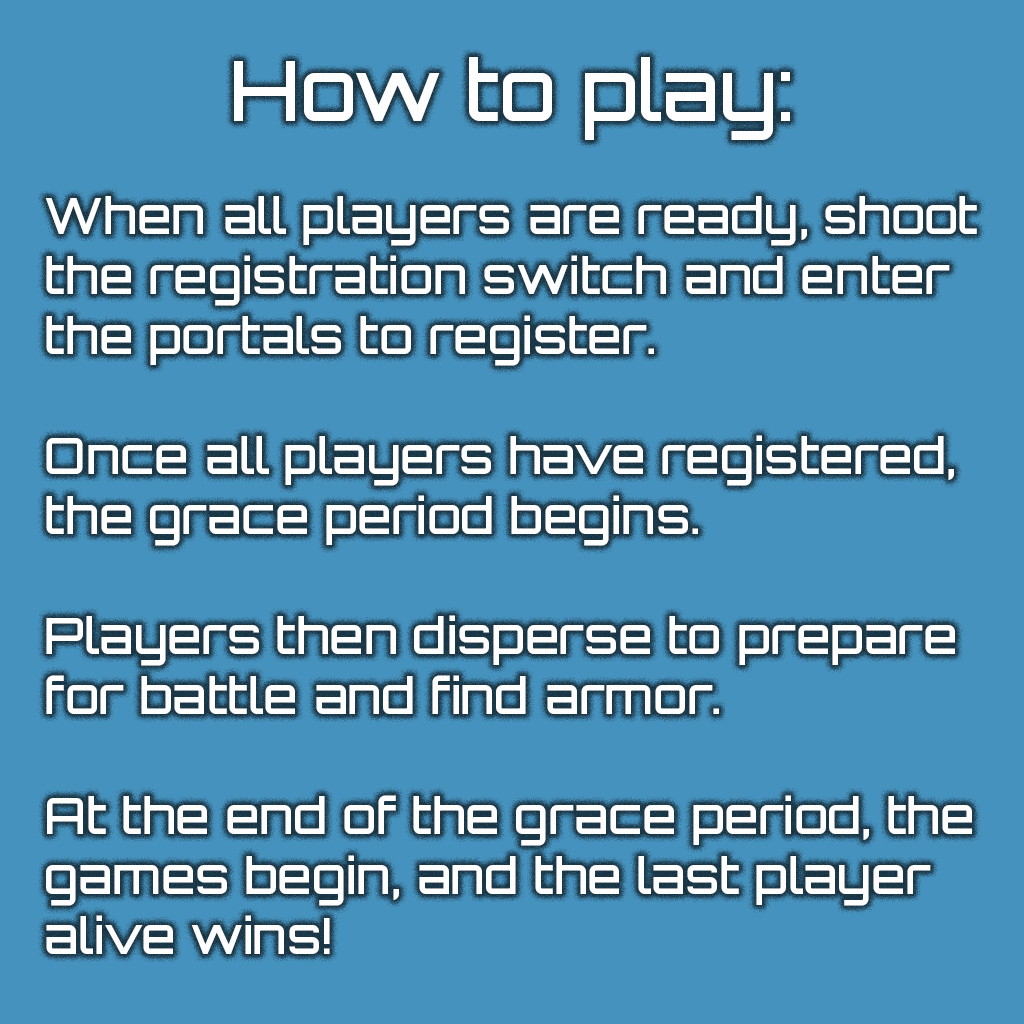
<style>
.page{position:relative;width:1024px;height:1024px;background:#4692be}
.page>*{position:absolute;margin:0}
.t1{font:83.3px "Orbitron-Medium";color:#fefefe}
.t2{font:50px "Orbitron-Medium";color:#fefefe}
</style>
<div class="page">
<p class="t1" style="left:234px;top:57px;width:556px;height:83px">How to play:</p>
<p class="t2" style="left:45px;top:196px;width:932px;height:758px">When all players are ready, shoot<br>the registration switch and enter<br>the portals to register. <br><br>Once all players have registered,<br>the grace period begins. <br><br>Players then disperse to prepare<br>for battle and find armor. <br><br>At the end of the grace period, the<br>games begin, and the last player<br>alive wins!</p>
</div>
